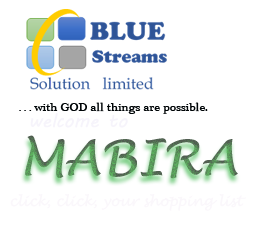
<style>
.page{position:relative;width:263px;height:240px;background:#ffffff}
.page>*{position:absolute;margin:0}
.t1{font:12px "PlantagenetCherokee";color:#000507}
.t2{font:11px "PlantagenetCherokee";color:#000507}
.t3{font:18.6px "MVBoli";color:#f6f4fb}
.t4{font:48px "LucidaHandwriting-Italic"}
.t5{font:14px "LucidaHandwriting-Italic";color:#faf7fb}
</style>
<div class="page">
<p class="t1" style="left:19px;top:102px;width:189px;height:12px"><span class="t2">. . . </span>with GOD all things are possible.</p>
<p class="t3" style="left:30px;top:113px;width:98px;height:15px">welcome to</p>
<p class="t4" style="left:25px;top:135px;width:213px;height:44px">MABIRA</p>
<p class="t5" style="left:10px;top:194px;width:236px;height:17px">click, click, your shopping list</p>
</div>
